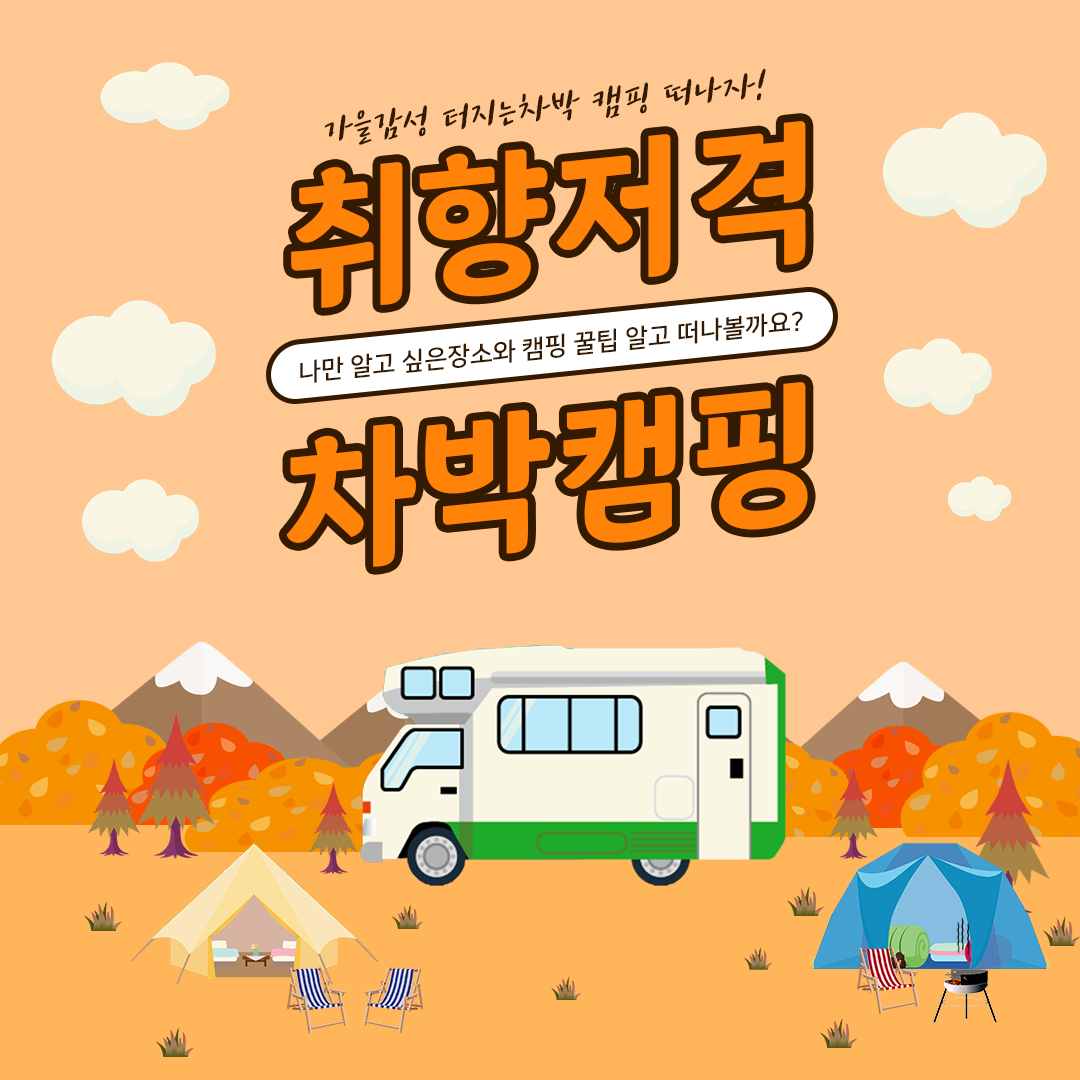
<style>
.page{position:relative;width:1080px;height:1080px;background:#ffc892}
.page>*{position:absolute;margin:0}
.t1{font:45px "tvNEnjoystoriesB";color:#341f01}
.t2{font:170px "SDSamliphopangcheTTFBasic";color:#ff8209}
.t3{font:25px "NanumSquareB";color:#341f01}
</style>
<div class="page">
<p class="t1" style="left:324px;top:68px;width:442px;height:77px;rotate:-6deg">가을감성 터지는차박 캠핑 떠나자!</p>
<p class="t2" style="left:291px;top:121px;width:515px;height:187px;rotate:-6deg">취향저격</p>
<p class="t3" style="left:300px;top:311px;width:503px;height:72px;rotate:-6deg">나만 알고 싶은장소와 캠핑 꿀팁 알고 떠나볼까요?</p>
<p class="t2" style="left:286px;top:382px;width:522px;height:185px;rotate:-6deg">차박캠핑</p>
</div>
